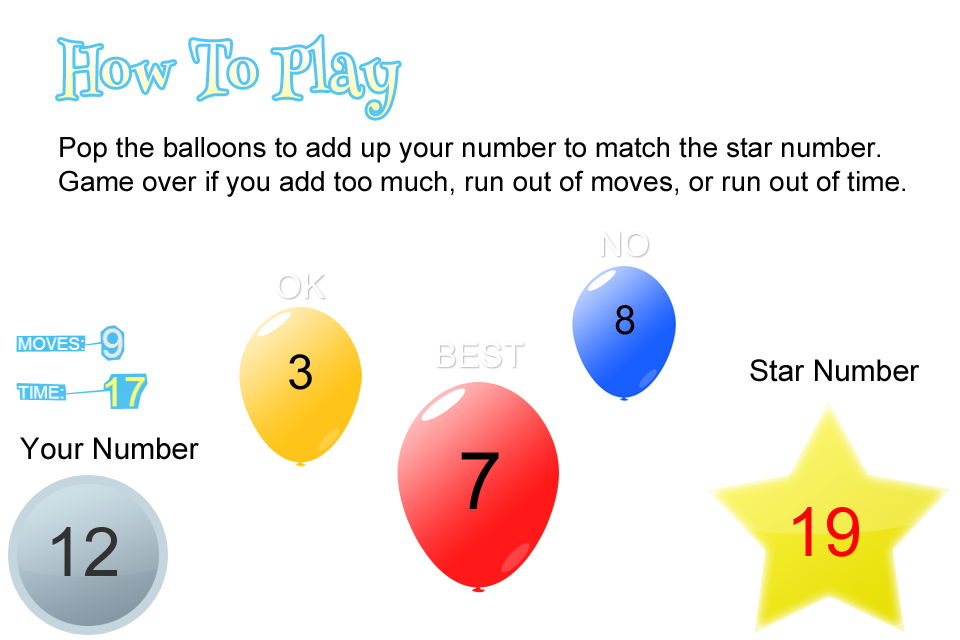
<style>
.page{position:relative;width:960px;height:640px;background:#ffffff}
.page>*{position:absolute;margin:0}
.t1{font:58.2px "HennyPenny-Regular"}
.t2{font:28px "ArialMT";color:#000000}
.t3{font:40px "ArialMT";color:#000000}
.t4{font:48.4px "ArialMT";color:#000000}
.t5{font:30px "ArialMT";color:#000000}
.t6{font:79.7px "ArialMT";color:#000000}
.t7{font:68.3px "ArialMT";color:#ff0000}
.t8{font:68.3px "ArialMT";color:#323232}
</style>
<div class="page">
<p class="t1" style="left:58px;top:36px;width:341px;height:82px">How To Play</p>
<p class="t2" style="left:59px;top:137px;width:846px;height:60px">Pop the balloons to add up your number to match the star number.<br>Game over if you add too much, run out of moves, or run out of time.</p>
<p class="t3" style="left:615px;top:305px;width:20px;height:30px">8</p>
<p class="t4" style="left:289px;top:354px;width:23px;height:36px">3</p>
<p class="t5" style="left:750px;top:359px;width:170px;height:23px">Star Number</p>
<p class="t5" style="left:20px;top:437px;width:179px;height:23px">Your Number</p>
<p class="t6" style="left:461px;top:452px;width:38px;height:57px">7</p>
<p class="t7" style="left:793px;top:507px;width:66px;height:50px">19</p>
<p class="t8" style="left:52px;top:527px;width:65px;height:49px">12</p>
</div>
